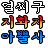
<style>
.page{position:relative;width:48px;height:48px;background:#ffffff}
.page>*{position:absolute;margin:0}
.t1{font:15px "Sam3KRFont";color:#ffffff}
.t2{font:15px "Sam3KRFont"}
</style>
<div class="page">
<p class="t1" style="left:2px;top:1px;width:42px;height:12px">얼씨구</p>
<p class="t2" style="left:2px;top:16px;width:42px;height:12px">지화자</p>
<p class="t2" style="left:2px;top:31px;width:42px;height:12px">아뿔사</p>
</div>
